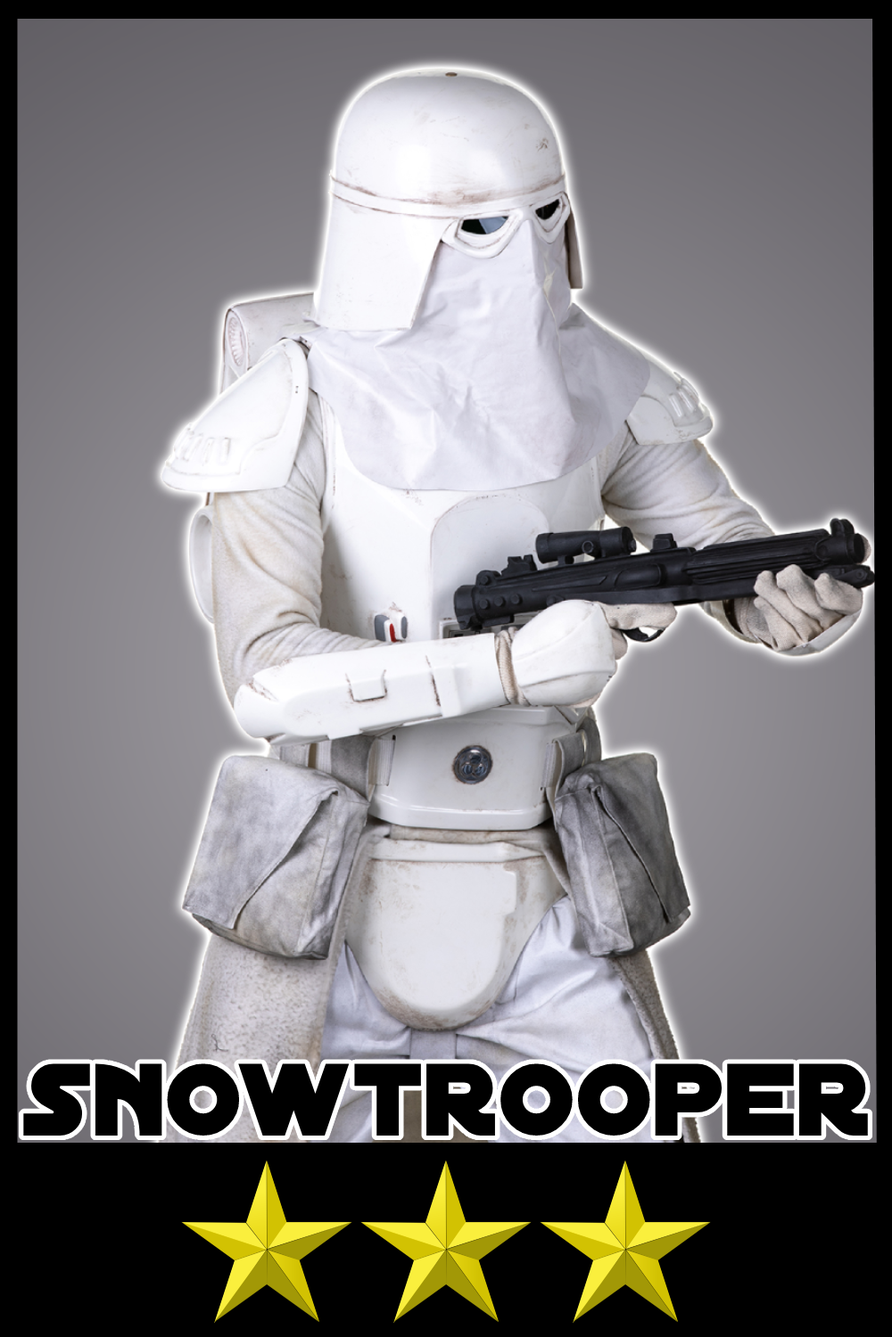
<style>
.page{position:relative;width:892px;height:1337px}
.page>*{position:absolute;margin:0}
.t1{font:110.6px "DistantGalaxy";color:#000000}
</style>
<div class="page">
<p class="t1" style="left:23px;top:1064px;width:845px;height:72px">snowtrooper</p>
</div>
